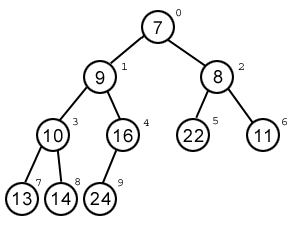
<style>
.page{position:relative;width:293px;height:226px;background:#ffffff}
.page>*{position:absolute;margin:0}
.t1{font:12px "Courier";letter-spacing:0.075em}
.t2{font:18px "ArialMT";letter-spacing:0.075em;color:#000000}
.t3{font:12px "Courier";letter-spacing:0.075em;color:#000000}
</style>
<div class="page">
<p class="t1" style="left:176px;top:9px;width:5px;height:8px">0</p>
<p class="t2" style="left:153px;top:21px;width:9px;height:13px">7</p>
<p class="t1" style="left:122px;top:63px;width:5px;height:7px">1</p>
<p class="t3" style="left:238px;top:63px;width:6px;height:7px">2</p>
<p class="t2" style="left:95px;top:71px;width:10px;height:14px">9</p>
<p class="t2" style="left:213px;top:70px;width:10px;height:14px">8</p>
<p class="t1" style="left:73px;top:118px;width:5px;height:8px">3</p>
<p class="t3" style="left:143px;top:119px;width:6px;height:7px">4</p>
<p class="t1" style="left:213px;top:117px;width:5px;height:8px">5</p>
<p class="t1" style="left:282px;top:118px;width:5px;height:8px">6</p>
<p class="t2" style="left:44px;top:129px;width:19px;height:14px">10</p>
<p class="t2" style="left:114px;top:129px;width:19px;height:14px">16</p>
<p class="t2" style="left:183px;top:129px;width:21px;height:13px">22</p>
<p class="t2" style="left:255px;top:129px;width:15px;height:13px">11</p>
<p class="t1" style="left:36px;top:179px;width:5px;height:7px">7</p>
<p class="t1" style="left:75px;top:178px;width:5px;height:8px">8</p>
<p class="t1" style="left:118px;top:179px;width:5px;height:8px">9</p>
<p class="t2" style="left:13px;top:192px;width:19px;height:14px">13</p>
<p class="t2" style="left:52px;top:192px;width:19px;height:13px">14</p>
<p class="t2" style="left:90px;top:192px;width:21px;height:13px">24</p>
</div>
